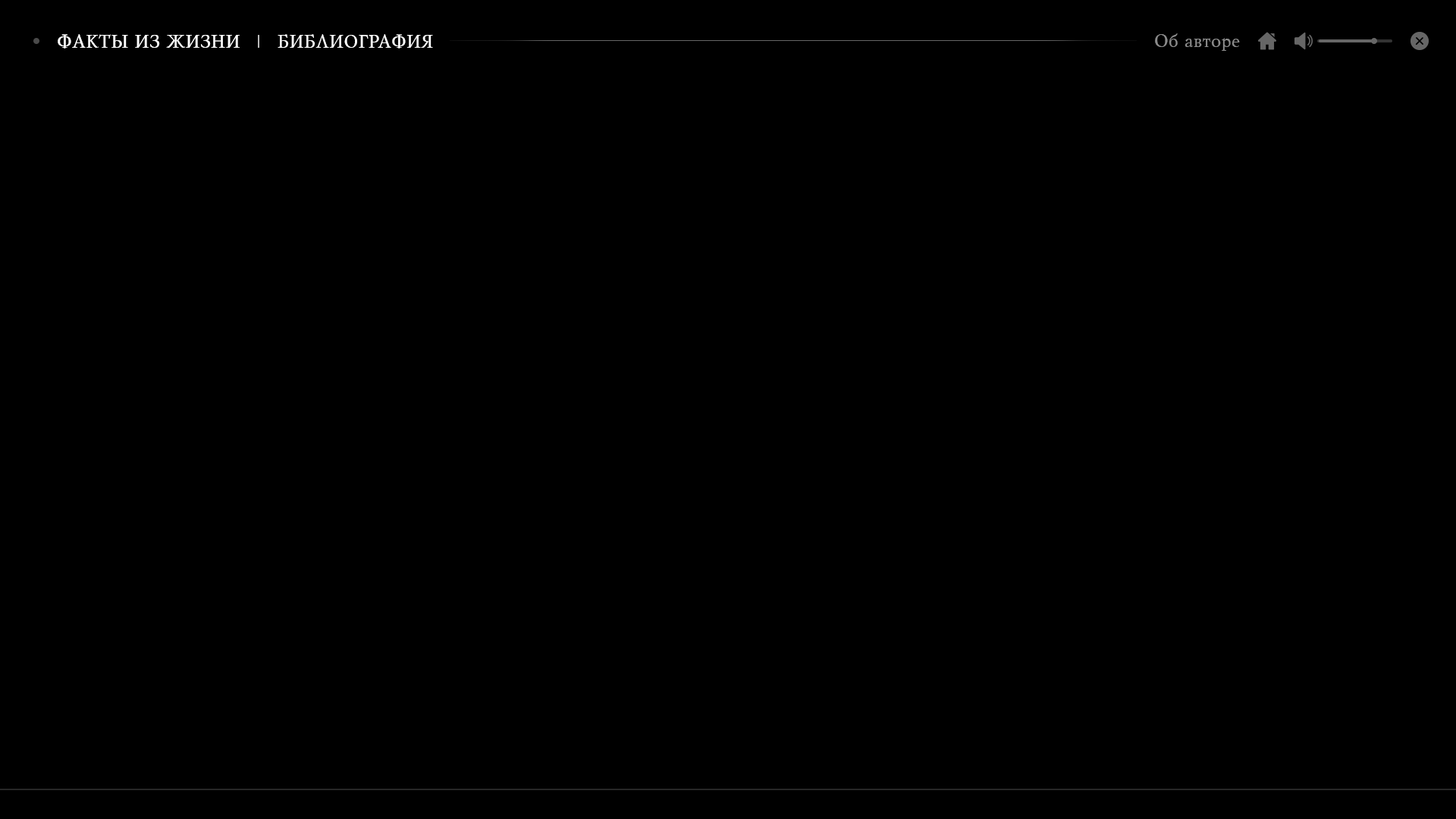
<style>
.page{position:relative;width:1456px;height:819px;background:#000000}
.page>*{position:absolute;margin:0}
.t1{font:18.2px "MyslCyrillic";color:#ffffff}
.t2{font:18.2px "MyslCyrillic";color:#8b8b8b}
</style>
<div class="page">
<p class="t1" style="left:58px;top:34px;width:182px;height:15px;opacity:0.4">ФАКТЫ ИЗ ЖИЗНИ</p>
<p class="t1" style="left:58px;top:34px;width:182px;height:15px">ФАКТЫ ИЗ ЖИЗНИ</p>
<p class="t1" style="left:278px;top:34px;width:155px;height:15px">БИБЛИОГРАФИЯ</p>
<p class="t2" style="left:1155px;top:33px;width:85px;height:18px">Об авторе</p>
</div>
